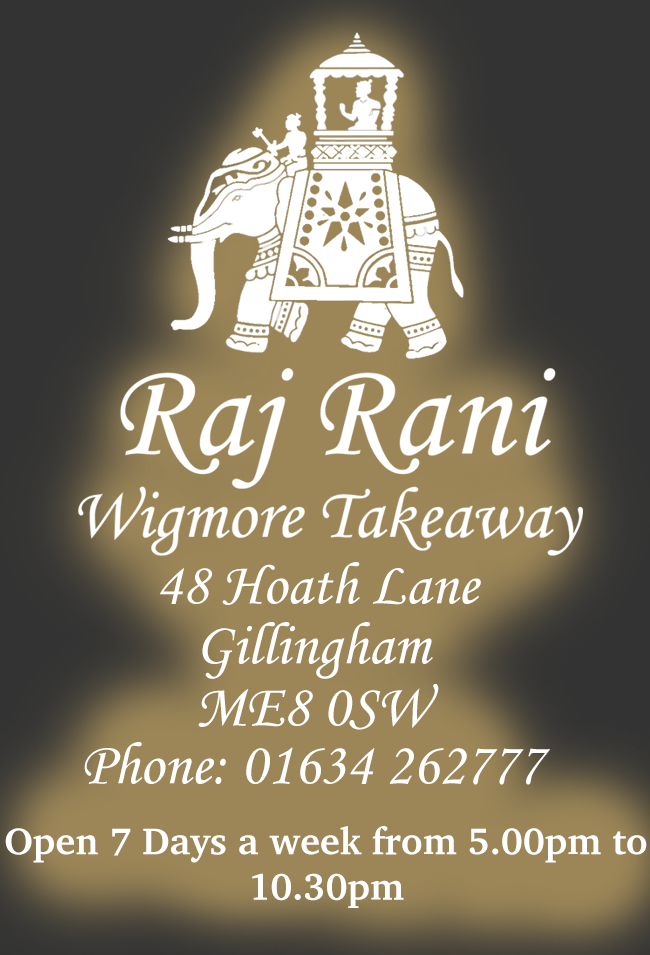
<style>
.page{position:relative;width:650px;height:955px}
.page>*{position:absolute;margin:0}
.t1{font:60px "MonotypeCorsiva";color:#ffffff}
.t2{font:38px "Charter-Bold";color:#ffffff}
</style>
<div class="page">
<p class="t1" style="left:160px;top:562px;width:321px;height:43px">48 Hoath Lane</p>
<p class="t1" style="left:202px;top:622px;width:231px;height:57px">Gillingham</p>
<p class="t1" style="left:198px;top:684px;width:241px;height:46px">ME8 0SW</p>
<p class="t1" style="left:84px;top:742px;width:467px;height:43px">Phone: 01634 262777</p>
<p class="t2" style="left:5px;top:826px;width:642px;height:82px;text-align:center">Open 7 Days a week from 5.00pm to 10.30pm</p>
</div>
